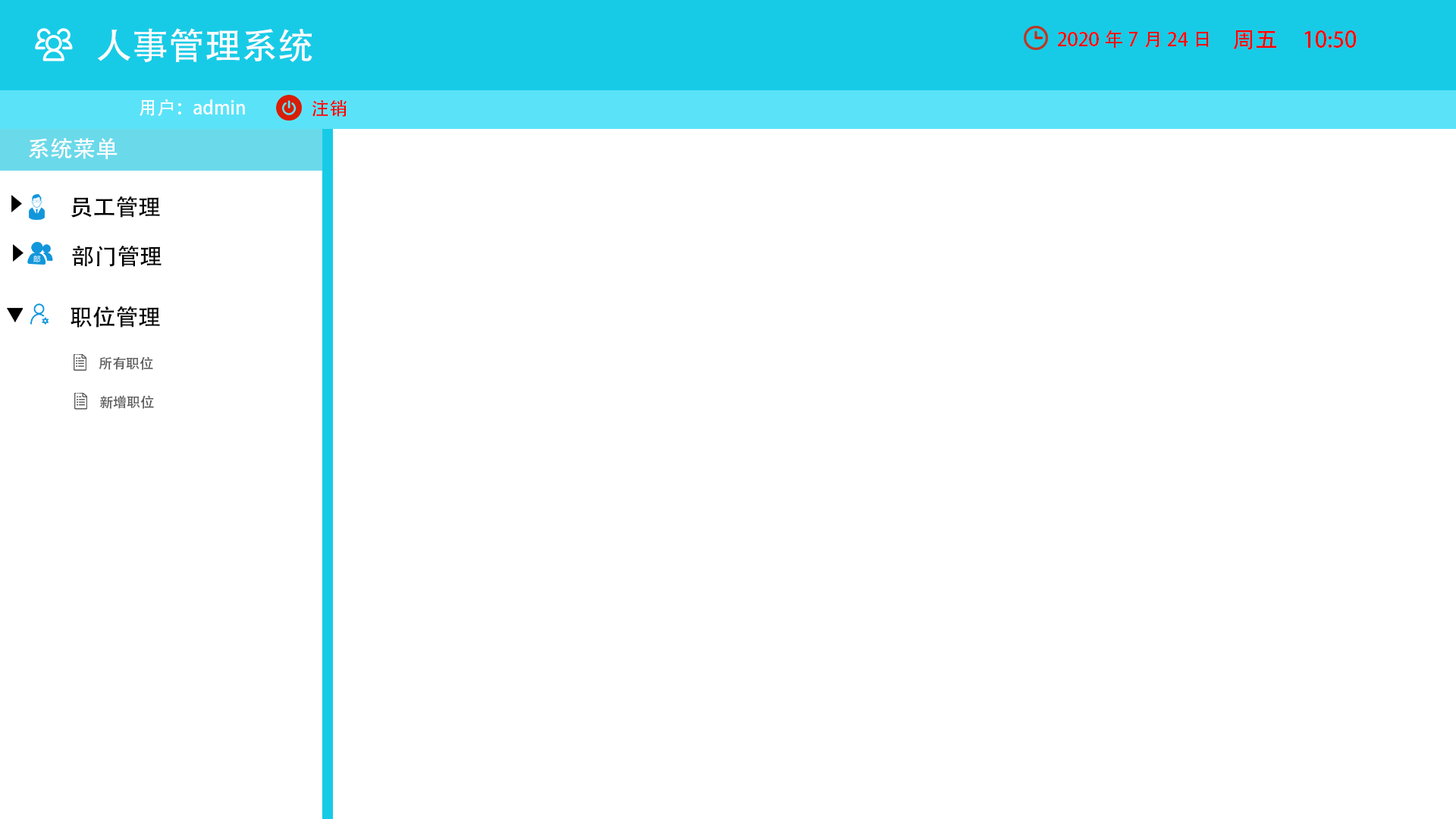
<style>
.page{position:relative;width:1456px;height:819px;background:#ffffff}
.page>*{position:absolute;margin:0}
.t1{font:36.4px "AdobeHeitiStd-Regular";color:#fcfcfc}
.t2{font:18.9px "AdobeHeitiStd-Regular";color:#ff0101}
.t3{font:22.3px "AdobeHeitiStd-Regular";color:#ff0101}
.t4{font:22px "AdobeHeitiStd-Regular";color:#ff0101}
.t5{font:18.2px "AdobeHeitiStd-Regular";color:#ffffff}
.t6{font:18.2px "AdobeHeitiStd-Regular";color:#fc0000}
.t7{font:22.7px "AdobeHeitiStd-Regular";color:#fefefe}
.t8{font:22.7px "AdobeHeitiStd-Regular";color:#000000}
.t9{font:13.6px "AdobeHeitiStd-Regular";color:#5c5c5c}
</style>
<div class="page">
<p class="t1" style="left:97px;top:28px;width:215px;height:34px">人事管理系统</p>
<p class="t2" style="left:1058px;top:30px;width:151px;height:19px">2020年7月24日</p>
<p class="t3" style="left:1233px;top:30px;width:43px;height:20px">周五</p>
<p class="t4" style="left:1304px;top:30px;width:53px;height:18px">10:50</p>
<p class="t5" style="left:140px;top:99px;width:105px;height:17px">用户：admin</p>
<p class="t6" style="left:312px;top:99px;width:35px;height:18px">注销</p>
<p class="t7" style="left:29px;top:137px;width:89px;height:22px">系统菜单</p>
<p class="t8" style="left:71px;top:196px;width:89px;height:22px">员工管理</p>
<p class="t8" style="left:72px;top:245px;width:90px;height:22px">部门管理</p>
<p class="t8" style="left:71px;top:306px;width:89px;height:22px">职位管理</p>
<p class="t9" style="left:99px;top:356px;width:54px;height:14px">所有职位</p>
<p class="t9" style="left:99px;top:395px;width:55px;height:14px">新增职位</p>
</div>
